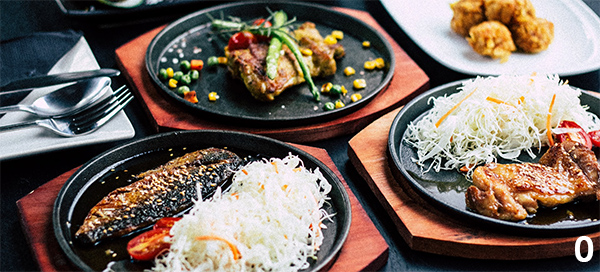
<style>
.page{position:relative;width:600px;height:272px}
.page>*{position:absolute;margin:0}
.t1{font:36px "CenturyGothic-Bold";color:#ffffff}
</style>
<div class="page">
<p class="t1" style="left:575px;top:236px;width:19px;height:26px">0</p>
</div>
